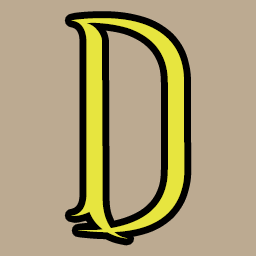
<style>
.page{position:relative;width:256px;height:256px;background:#bcaa91}
.page>*{position:absolute;margin:0}
.t1{font:150px "Endor";color:#e7e53f}
</style>
<div class="page">
<p class="t1" style="left:71px;top:18px;width:114px;height:221px">D</p>
</div>
